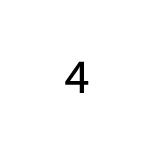
<style>
.page{position:relative;width:150px;height:150px;background:#ffffff}
.page>*{position:absolute;margin:0}
.t1{font:48px "MyriadPro-Regular";color:#000000}
</style>
<div class="page">
<p class="t1" style="left:65px;top:61px;width:24px;height:32px">4</p>
</div>
